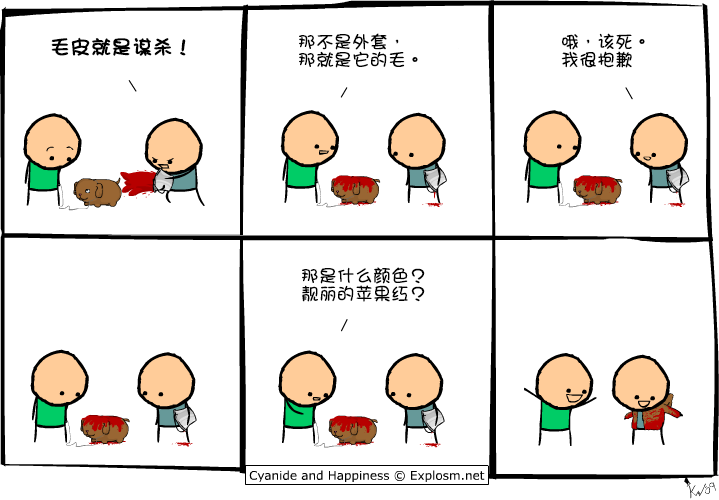
<style>
.page{position:relative;width:719px;height:500px;background:#ffffff}
.page>*{position:absolute;margin:0}
.t1{font:20px "DFGirl";color:#000000;font-weight:bold}
.t2{font:18px/18px "DFGirl";color:#000000}
</style>
<div class="page">
<p class="t1" style="left:51px;top:37px;width:135px;height:19px">毛皮就是谋杀！</p>
<p class="t2" style="left:299px;top:33px;width:119px;height:35px">那不是外套，<br>那就是它的毛。</p>
<p class="t2" style="left:561px;top:33px;width:84px;height:35px">哦，该死。<br>我很抱歉</p>
<p class="t2" style="left:302px;top:267px;width:123px;height:35px">那是什么颜色？<br>靓丽的苹果红？</p>
</div>
